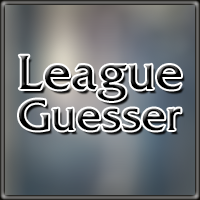
<style>
.page{position:relative;width:200px;height:200px}
.page>*{position:absolute;margin:0}
.t1{font:48px "FrizQuadrataTT";color:#000000}
.t2{font:43px "FrizQuadrataTT";color:#000000}
</style>
<div class="page">
<p class="t1" style="left:19px;top:55px;width:162px;height:46px">League</p>
<p class="t2" style="left:19px;top:99px;width:162px;height:32px">Guesser</p>
</div>
